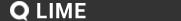
<style>
.page{position:relative;width:181px;height:21px;background:#333333}
.page>*{position:absolute;margin:0}
.t1{font:21.5px "Roboto-Bold";letter-spacing:0.04em;color:#ffffff;scale:0.97 1}
</style>
<div class="page">
<p class="t1" style="left:37px;top:3px;width:49px;height:16px">LIME</p>
</div>
